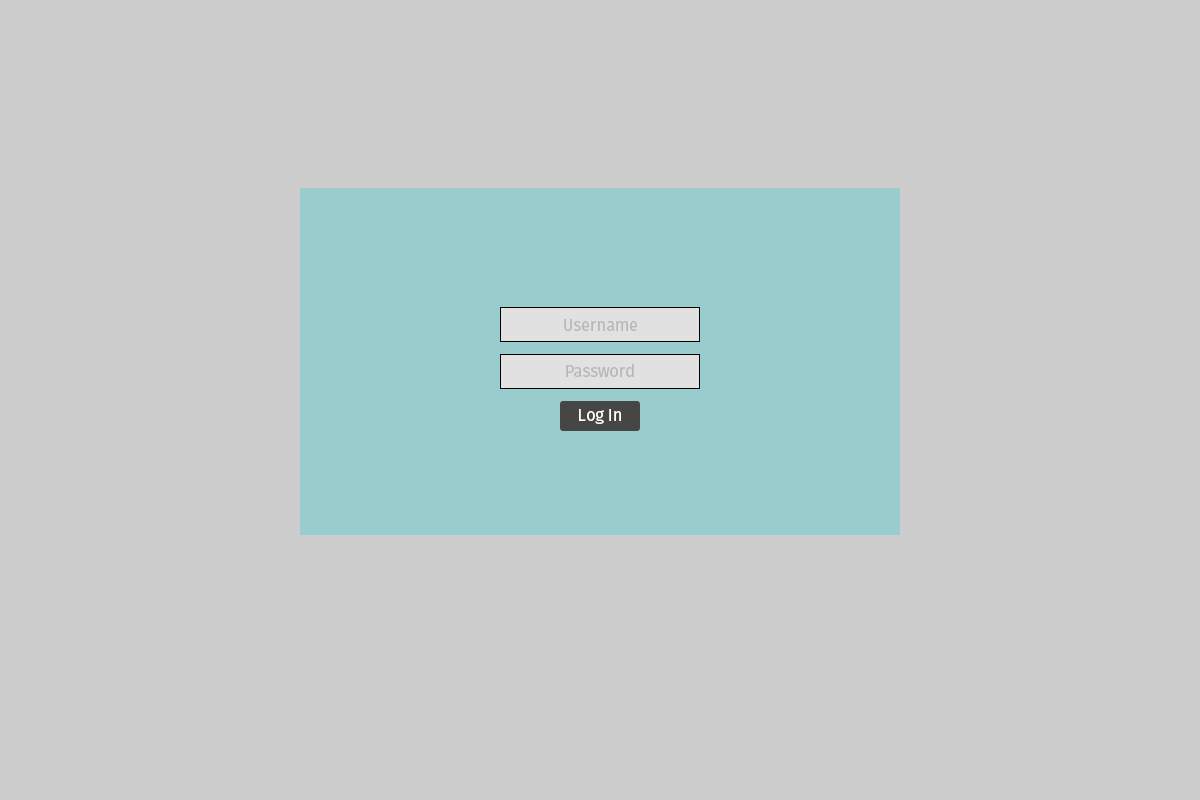
<style>
.page{position:relative;width:1200px;height:800px;background:#cccccc}
.page>*{position:absolute;margin:0}
.t1{font:16.7px "FiraSans-Regular";letter-spacing:-0.01em;color:#b9b7b7}
.t2{font:16.7px "FiraSans-Regular";letter-spacing:-0.01em;color:#ffffff}
</style>
<div class="page">
<p class="t1" style="left:564px;top:319px;width:73px;height:12px">Username</p>
<p class="t1" style="left:566px;top:364px;width:68px;height:13px">Password</p>
<p class="t2" style="left:579px;top:409px;width:42px;height:15px">Log In</p>
</div>
